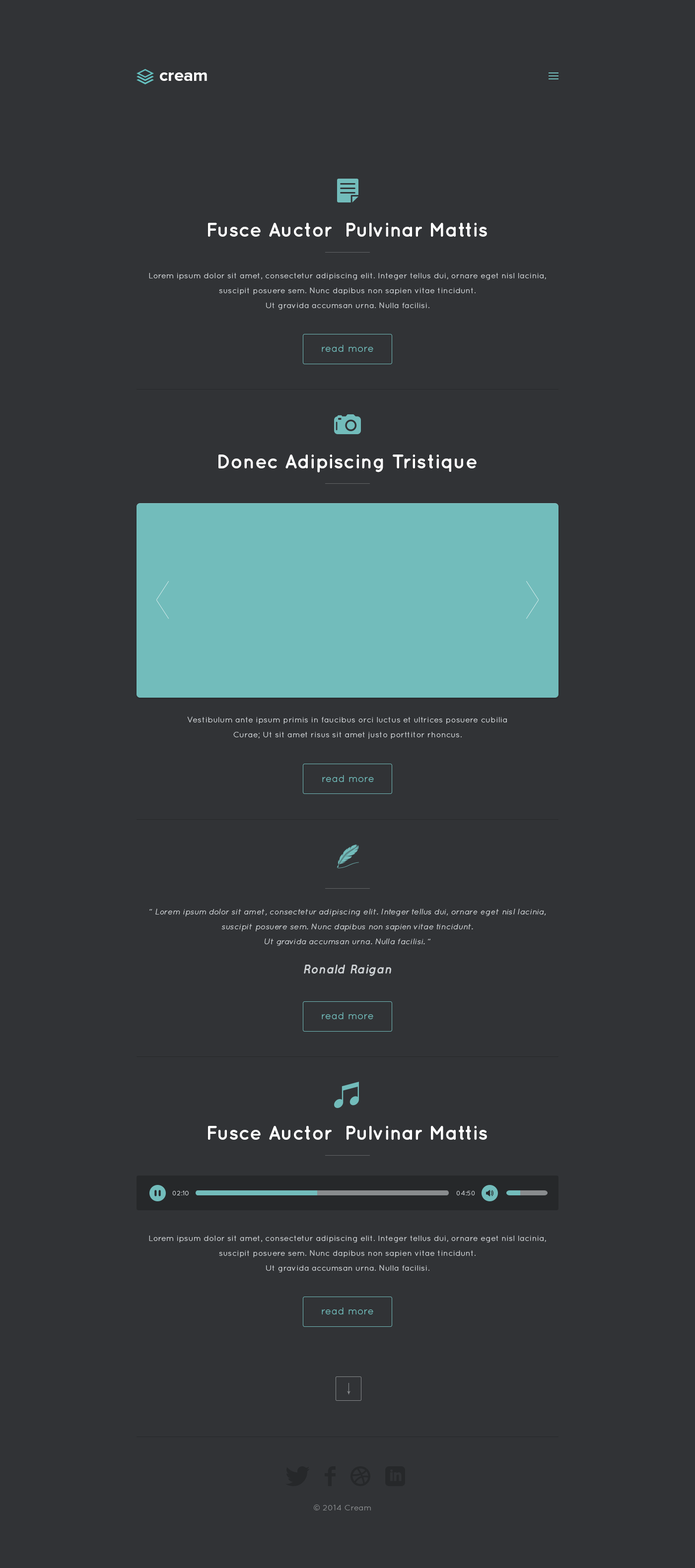
<style>
.page{position:relative;width:695px;height:1568px;background:#313336}
.page>*{position:absolute;margin:0}
.t1{font:17.4px "ProximaNova-Bold";color:#ffffff}
.t2{font:19.8px "Quicksand-Bold";color:#ffffff}
.t3{font:7.9px/14.9px "Quicksand-Regular";letter-spacing:0.02em;color:#ced2d5}
.t4{font:7.9px/14.9px "Quicksand-Light";letter-spacing:0.02em;color:#ced2d5}
.t5{font:9.9px "Quicksand-Regular";letter-spacing:0.02em;color:#72bcbb}
.t6{font:7.9px/14.9px "Quicksand-Italic";letter-spacing:0.02em;color:#ced2d5}
.t7{font:12.4px "Quicksand-BoldItalic";letter-spacing:0.02em;color:#ced2d5}
.t8{font:6.5px "Quicksand-Regular";letter-spacing:0.02em;color:#ced2d5}
.t9{font:7.9px "Quicksand-Regular";letter-spacing:0.02em;color:#878a8c}
</style>
<div class="page">
<p class="t1" style="left:160px;top:72px;width:47px;height:9px">cream</p>
<p class="t2" style="left:208px;top:223px;width:279px;height:14px">Fusce Auctor  Pulvinar Mattis</p>
<p class="t3" style="left:149px;top:273px;width:397px;height:37px;text-align:center">Lorem ipsum dolor sit amet, consectetur adipiscing elit. Integer tellus dui, ornare eget nisl lacinia, suscipit posuere sem. Nunc dapibus non sapien vitae tincidunt. <br>Ut gravida accumsan urna. Nulla facilisi. <br><span class="t4">Pellentesque sit amet sem ut leo gravida elementum.</span></p>
<p class="t5" style="left:322px;top:345px;width:51px;height:7px">read more</p>
<p class="t2" style="left:218px;top:455px;width:258px;height:17px">Donec Adipiscing Tristique</p>
<p class="t3" style="left:187px;top:717px;width:320px;height:22px;text-align:center">Vestibulum ante ipsum primis in faucibus orci luctus et ultrices posuere cubilia <br>Curae; Ut sit amet risus sit amet justo porttitor rhoncus.</p>
<p class="t5" style="left:322px;top:775px;width:52px;height:7px">read more</p>
<p class="t6" style="left:149px;top:909px;width:397px;height:37px;text-align:center">“ Lorem ipsum dolor sit amet, consectetur adipiscing elit. Integer tellus dui, ornare eget nisl lacinia, suscipit posuere sem. Nunc dapibus non sapien vitae tincidunt. <br>Ut gravida accumsan urna. Nulla facilisi. ”<br>Pellentesque sit amet sem ut leo gravida elementum.</p>
<p class="t7" style="left:304px;top:965px;width:87px;height:11px">Ronald Raigan</p>
<p class="t5" style="left:322px;top:1012px;width:51px;height:7px">read more</p>
<p class="t2" style="left:208px;top:1126px;width:279px;height:14px">Fusce Auctor  Pulvinar Mattis</p>
<p class="t8" style="left:172px;top:1190px;width:17px;height:5px">02:10</p>
<p class="t8" style="left:456px;top:1190px;width:19px;height:5px">04:50</p>
<p class="t3" style="left:149px;top:1236px;width:397px;height:36px;text-align:center">Lorem ipsum dolor sit amet, consectetur adipiscing elit. Integer tellus dui, ornare eget nisl lacinia, suscipit posuere sem. Nunc dapibus non sapien vitae tincidunt. <br>Ut gravida accumsan urna. Nulla facilisi. <br><span class="t4">Pellentesque sit amet sem ut leo gravida elementum.</span></p>
<p class="t5" style="left:322px;top:1307px;width:51px;height:7px">read more</p>
<p class="t9" style="left:314px;top:1504px;width:57px;height:6px">© 2014 Cream</p>
</div>
